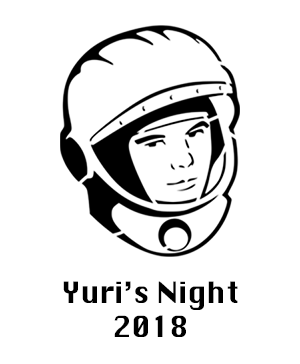
<style>
.page{position:relative;width:300px;height:364px;background:#ffffff}
.page>*{position:absolute;margin:0}
.t1{font:28.5px/33.9px "Silom";color:#000000}
</style>
<div class="page">
<p class="t1" style="left:63px;top:281px;width:175px;height:56px;text-align:center">Yuri’s Night<br>2018</p>
</div>
